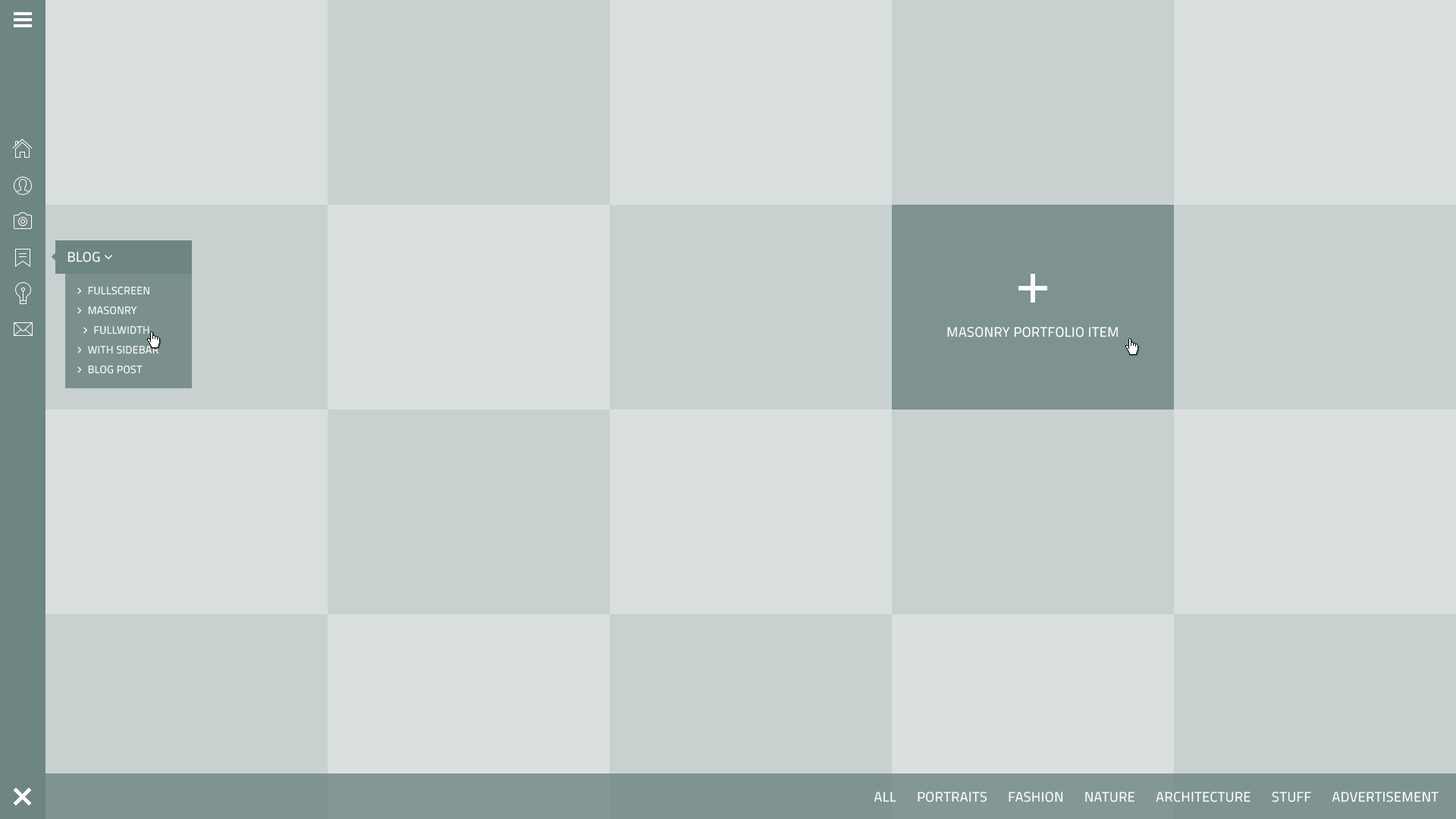
<style>
.page{position:relative;width:1456px;height:819px;background:#c9d0d0}
.page>*{position:absolute;margin:0}
.t1{font:13.6px "TitilliumWeb-Regular";letter-spacing:0.03em;color:#ffffff;text-transform:uppercase}
</style>
<div class="page">
<p class="t1" style="left:947px;top:327px;width:171px;height:10px">masonry Portfolio item</p>
<p class="t1" style="left:874px;top:792px;width:565px;height:10px">all      portraits      fashion      nature      architecture      stuff      advertisement</p>
</div>
